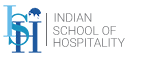
<style>
.page{position:relative;width:144px;height:58px;background:#ffffff}
.page>*{position:absolute;margin:0}
.t1{font:12px "Roboto-Light";color:#6d6e71}
.t2{font:12px "Roboto-Light"}
</style>
<div class="page">
<p class="t1" style="left:54px;top:13px;width:38px;height:9px">INDIAN</p>
<p class="t1" style="left:53px;top:26px;width:63px;height:9px">SCHOOL OF</p>
<p class="t2" style="left:53px;top:38px;width:72px;height:9px">HOSPITALITY</p>
</div>
